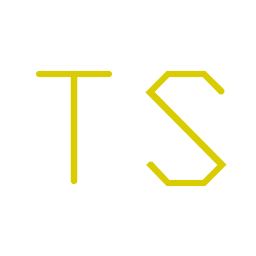
<style>
.page{position:relative;width:256px;height:256px;background:#ffffff}
.page>*{position:absolute;margin:0}
.t1{font:150px "Proxy8";color:#d9cc00;font-weight:bold}
</style>
<div class="page">
<p class="t1" style="left:35px;top:70px;width:192px;height:117px">TS</p>
</div>
